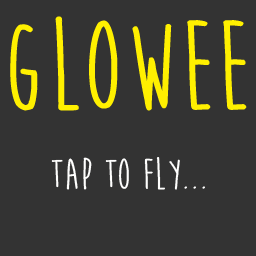
<style>
.page{position:relative;width:256px;height:256px;background:#333333}
.page>*{position:absolute;margin:0}
.t1{font:130px "MoonFlowerBold";color:#fff000}
.t2{font:45px "MoonFlowerBold";color:#fffffe}
</style>
<div class="page">
<p class="t1" style="left:10px;top:16px;width:237px;height:95px">Glowee</p>
<p class="t2" style="left:51px;top:157px;width:154px;height:33px">Tap to Fly...</p>
</div>
